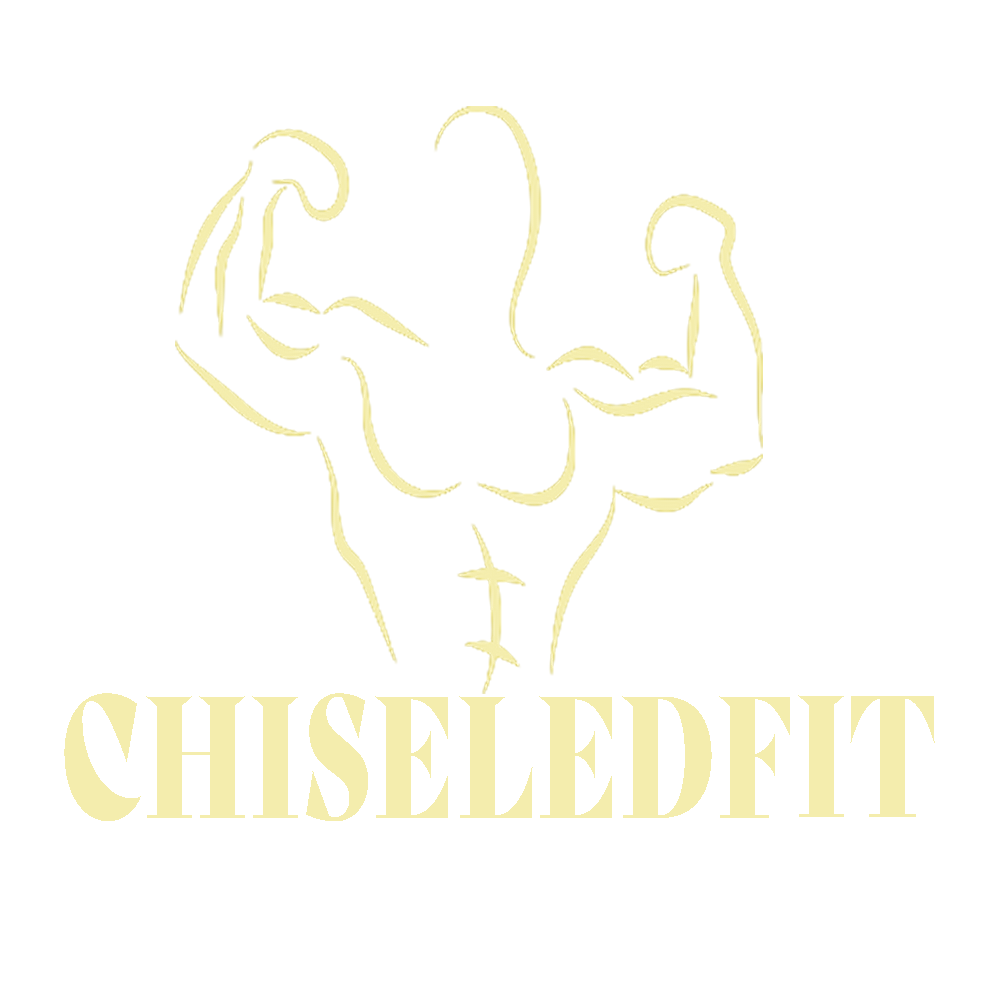
<style>
.page{position:relative;width:1000px;height:1000px;background:#ffffff}
.page>*{position:absolute;margin:0}
.t1{font:168.6px "BelyDisplay-Regular";letter-spacing:0.014em;color:#f4edad;scale:0.69 1}
</style>
<div class="page">
<p class="t1" style="left:64px;top:693px;width:871px;height:128px">CHISELEDFIT</p>
</div>
